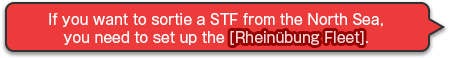
<style>
.page{position:relative;width:450px;height:58px;background:#ed3b3b}
.page>*{position:absolute;margin:0}
.t1{font:14px/18px "GothicMB101Pro-Regular";color:#ffffff}
.t2{font:14px/18px "GothicMB101Pro-Regular";color:#ffd3d3}
</style>
<div class="page">
<p class="t1" style="left:49px;top:13px;width:334px;height:32px;text-align:center">If you want to sortie a STF from the North Sea,<br>you need to set up the <span class="t2">[Rheinübung Fleet]</span>.</p>
<p class="t1" style="left:49px;top:13px;width:334px;height:32px;text-align:center">If you want to sortie a STF from the North Sea,<br>you need to set up the <span class="t2">[Rheinübung Fleet]</span>.</p>
</div>
